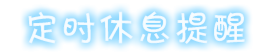
<style>
.page{position:relative;width:278px;height:55px;background:#ffffff}
.page>*{position:absolute;margin:0}
.t1{font:37.5px "FZKATJW--GB1-0";color:#f2faff}
</style>
<div class="page">
<p class="t1" style="left:28px;top:11px;width:217px;height:33px">定时休息提醒</p>
</div>
